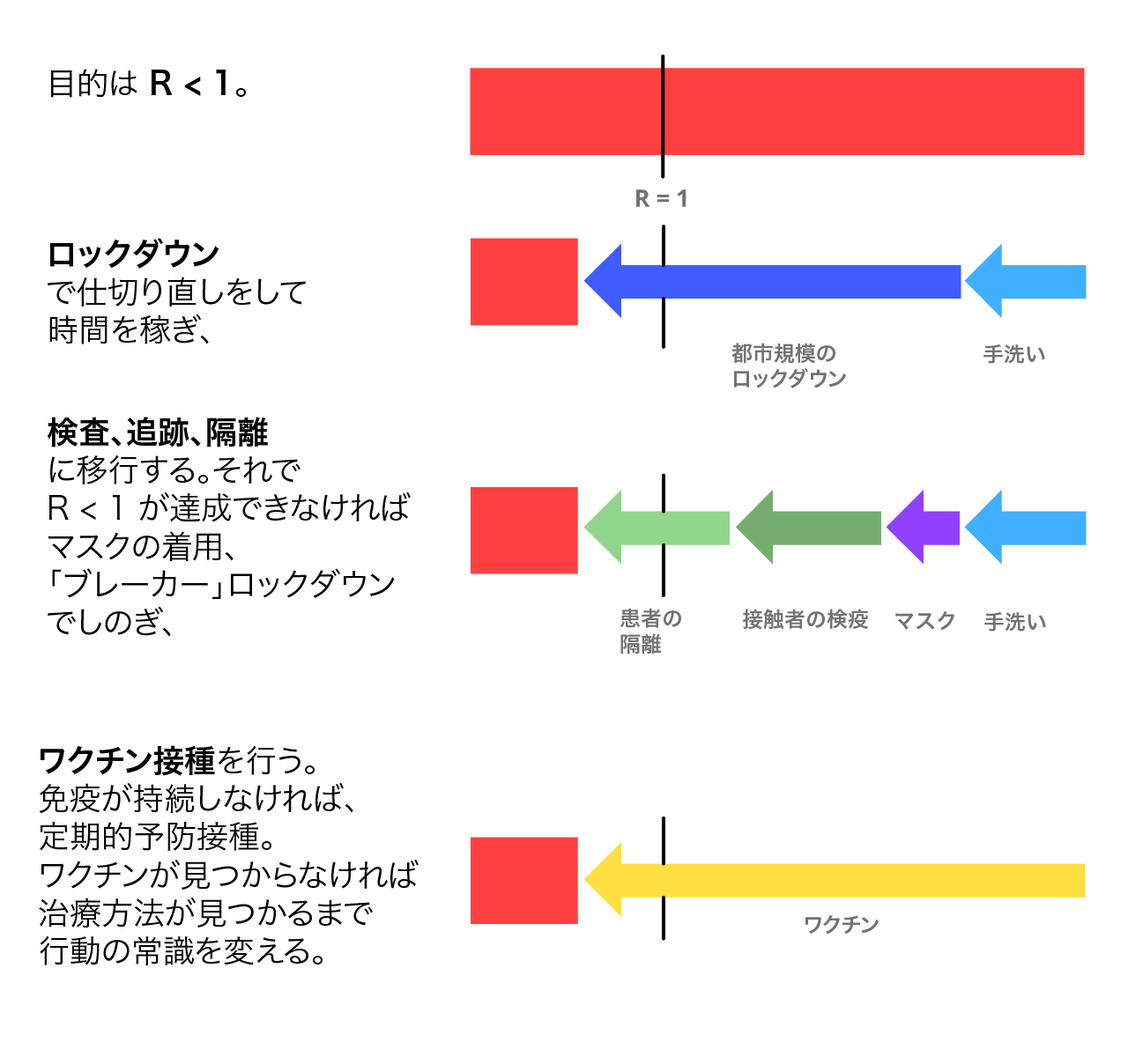
<style>
.page{position:relative;width:1128px;height:1057px;background:#ffffff}
.page>*{position:absolute;margin:0}
.t1{font:31.7px "HiraKakuProN-W6";color:#000000}
.t2{font:31.7px "HiraKakuProN-W3";color:#000000}
.t3{font:21.1px "HiraKakuProN-W6";color:#727272}
</style>
<div class="page">
<p class="t1" style="left:50px;top:69px;width:196px;height:29px"><span class="t2">目的は </span>R &lt; 1<span class="t2">。</span></p>
<p class="t2" style="left:48px;top:238px;width:258px;height:107px"><span class="t1">ロックダウン<br></span>で仕切り直しをして<br>時間を稼ぎ、</p>
<p class="t3" style="left:731px;top:343px;width:115px;height:46px">都市規模の<br>ロックダウン</p>
<p class="t3" style="left:983px;top:345px;width:62px;height:19px">手洗い</p>
<p class="t2" style="left:48px;top:417px;width:363px;height:220px"><span class="t1">検査、追跡、隔離<br></span>に移行する。それで<br>R &lt; 1 が達成できなければ<br>マスクの着用、<br>「ブレーカー」ロックダウン<br>でしのぎ、</p>
<p class="t3" style="left:620px;top:608px;width:61px;height:47px">患者の<br>隔離</p>
<p class="t3" style="left:743px;top:609px;width:125px;height:21px">接触者の検疫</p>
<p class="t3" style="left:895px;top:611px;width:59px;height:20px">マスク</p>
<p class="t3" style="left:984px;top:612px;width:62px;height:20px">手洗い</p>
<p class="t2" style="left:39px;top:745px;width:380px;height:221px"><span class="t1">ワクチン接種</span>を行う。<br>免疫が持続しなければ、<br>定期的予防接種。<br>ワクチンが見つからなければ<br>治療方法が見つかるまで<br>行動の常識を変える。</p>
<p class="t3" style="left:804px;top:915px;width:74px;height:20px">ワクチン</p>
</div>
